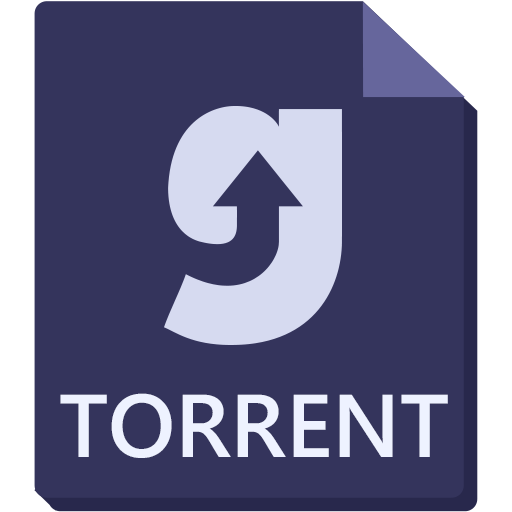
<style>
.page{position:relative;width:512px;height:512px;background:#34345c}
.page>*{position:absolute;margin:0}
.t1{font:89.1px "SegoeUI-SemiBold";color:#eef2ff}
</style>
<div class="page">
<p class="t1" style="left:60px;top:393px;width:388px;height:65px">TORRENT</p>
</div>
